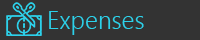
<style>
.page{position:relative;width:200px;height:40px;background:#333333}
.page>*{position:absolute;margin:0}
.t1{font:25px "SegoeUI-Semilight";color:#2cd1ea}
</style>
<div class="page">
<p class="t1" style="left:49px;top:11px;width:95px;height:24px">Expenses</p>
</div>
